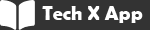
<style>
.page{position:relative;width:150px;height:30px;background:#333333}
.page>*{position:absolute;margin:0}
.t1{font:20px "BerlinSansFBDemi-Bold";color:#ffffff}
</style>
<div class="page">
<p class="t1" style="left:42px;top:6px;width:101px;height:17px">Tech X App</p>
</div>
